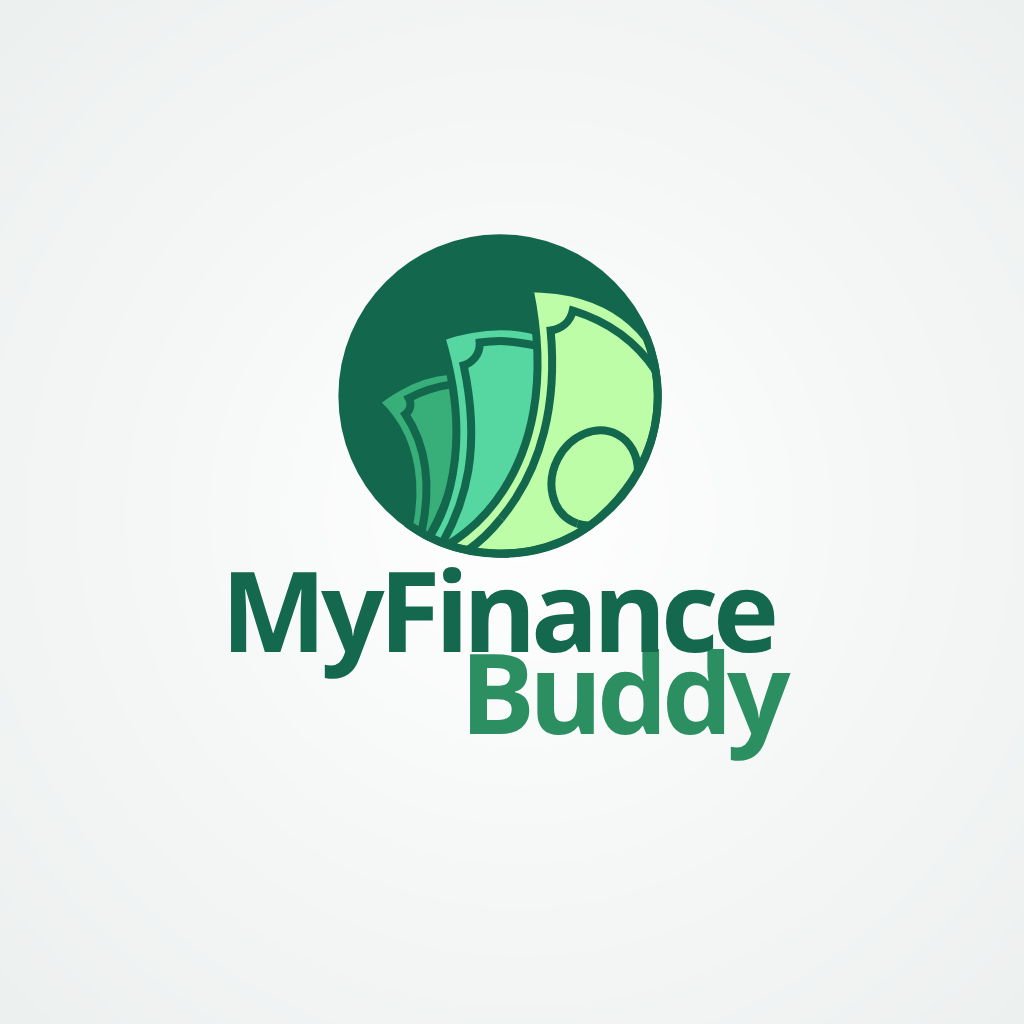
<style>
.page{position:relative;width:1024px;height:1024px}
.page>*{position:absolute;margin:0}
.t1{font:111.8px "OpenSans-Bold";letter-spacing:-0.05em;color:#14684e}
.t2{font:111.8px "OpenSans-Bold";letter-spacing:-0.05em;color:#2b8f62}
</style>
<div class="page">
<p class="t1" style="left:231px;top:567px;width:544px;height:112px">MyFinance</p>
<p class="t2" style="left:470px;top:649px;width:321px;height:112px">Buddy</p>
</div>
